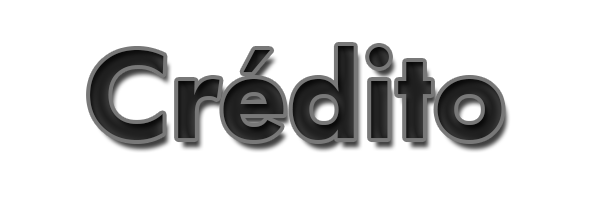
<style>
.page{position:relative;width:600px;height:200px;background:#ffffff}
.page>*{position:absolute;margin:0}
.t1{font:120px "FuturaBT-Heavy";color:#212121}
</style>
<div class="page">
<p class="t1" style="left:90px;top:46px;width:412px;height:94px">Crédito</p>
</div>
